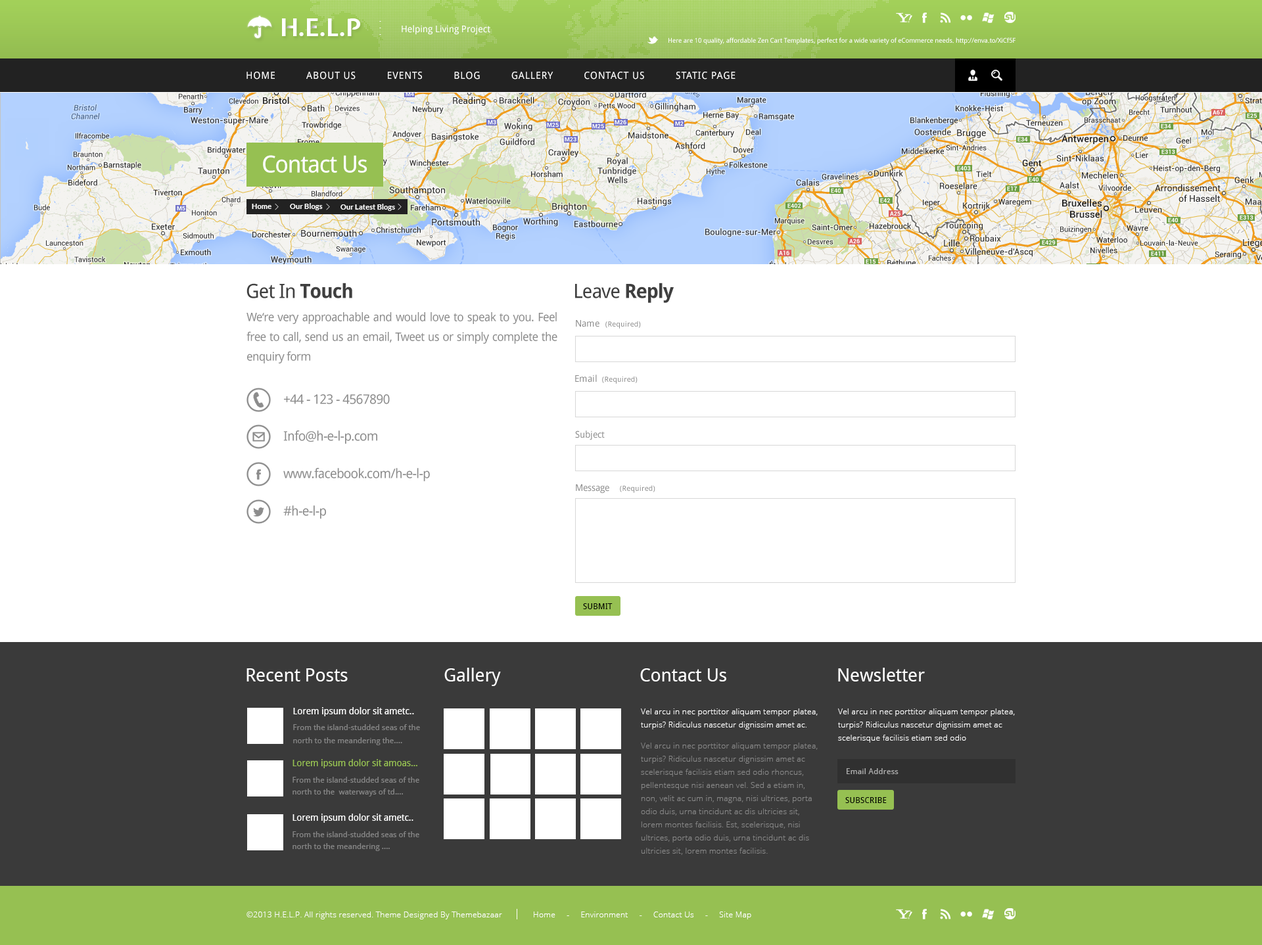
<style>
.page{position:relative;width:1262px;height:945px;background:#ffffff}
.page>*{position:absolute;margin:0}
.t1{font:24.3px "ExpletusSans-Bold";color:#ffffff}
.t2{font:7.9px/6.6px "ExpletusSans-Bold";color:#ffffff}
.t3{font:9.2px "DroidSans";color:#ffffff}
.t4{font:6.6px "DroidSans";letter-spacing:-0.01em;color:#ffffff}
.t5{font:9.9px "DroidSans";letter-spacing:0.05em;color:#ffffff;text-transform:uppercase}
.t6{font:23.7px "DroidSans";letter-spacing:-0.04em;color:#ffffff}
.t7{font:7.2px "Lato-Bold";letter-spacing:0.01em;color:#ffffff}
.t8{font:19.7px "DroidSans";letter-spacing:-0.04em;color:#3f3f3f}
.t9{font:19.7px "DroidSans-Bold";letter-spacing:-0.04em;color:#3f3f3f}
.t10{font:11.8px/19.7px "DroidSans";letter-spacing:-0.04em;color:#8c8c8c}
.t11{font:9.2px "DroidSans";color:#8c8c8c}
.t12{font:7.2px "DroidSans";letter-spacing:0.025em;color:#8c8c8c}
.t13{font:13.1px "DroidSans";letter-spacing:-0.04em;color:#8c8c8c}
.t14{font:7.9px "DroidSans";letter-spacing:0.025em;color:#000000;text-transform:uppercase}
.t15{font:18.4px "DroidSans";letter-spacing:-0.01em;color:#ffffff}
.t16{font:9.2px "DroidSans";letter-spacing:-0.01em;color:#ffffff}
.t17{font:7.9px/13.1px "OpenSans-Light";letter-spacing:0.025em;color:#ffffff}
.t18{font:7.9px/13.1px "DroidSans";color:#868686}
.t19{font:7.9px/13.1px "OpenSans-Light";letter-spacing:0.025em;color:#868686}
.t20{font:9.2px "DroidSans";letter-spacing:-0.01em;color:#96c052}
.t21{font:7.9px "DroidSans";letter-spacing:0.025em;color:#adadad}
.t22{font:7.9px/11.8px "DroidSans";color:#868686}
.t23{font:7.9px "OpenSans-Light";letter-spacing:0.025em;color:#ffffff}
</style>
<div class="page">
<p class="t1" style="left:282px;top:18px;width:79px;height:18px">H.E.L.P</p>
<p class="t2" style="left:379px;top:21px;width:2px;height:14px">.<br>.<br>.</p>
<p class="t3" style="left:402px;top:25px;width:88px;height:10px">Helping Living Project</p>
<p class="t4" style="left:668px;top:37px;width:347px;height:8px">Here are 10 quality, affordable Zen Cart Templates, perfect for a wide variety of eCommerce needs. http://enva.to/XiCf5F</p>
<p class="t5" style="left:246px;top:72px;width:489px;height:8px">Home          About Us          Events          Blog          Gallery          Contact Us          Static Page</p>
<p class="t6" style="left:263px;top:155px;width:104px;height:18px">Contact Us</p>
<p class="t7" style="left:252px;top:204px;width:19px;height:5px">Home</p>
<p class="t7" style="left:290px;top:203px;width:33px;height:7px">Our Blogs</p>
<p class="t7" style="left:340px;top:204px;width:55px;height:7px">Our Latest Blogs</p>
<p class="t8" style="left:246px;top:283px;width:106px;height:15px">Get In <span class="t9">Touch</span></p>
<p class="t8" style="left:575px;top:283px;width:99px;height:20px">Leave <span class="t9">Reply</span></p>
<p class="t10" style="left:246px;top:312px;width:311px;height:51px;text-align:justify">We‘re very approachable and would love to speak to you. Feel free to call, send us an email, Tweet us or simply complete the enquiry form</p>
<p class="t11" style="left:576px;top:320px;width:23px;height:7px">Name</p>
<p class="t12" style="left:605px;top:321px;width:36px;height:8px">(Required)</p>
<p class="t11" style="left:575px;top:375px;width:22px;height:7px">Email</p>
<p class="t12" style="left:602px;top:376px;width:35px;height:8px">(Required)</p>
<p class="t13" style="left:284px;top:394px;width:106px;height:10px">+44 - 123 - 4567890</p>
<p class="t13" style="left:283px;top:430px;width:94px;height:14px">Info@h-e-l-p.com</p>
<p class="t11" style="left:575px;top:430px;width:30px;height:10px">Subject</p>
<p class="t13" style="left:283px;top:468px;width:147px;height:14px">www.facebook.com/h-e-l-p</p>
<p class="t11" style="left:576px;top:484px;width:33px;height:10px">Message</p>
<p class="t12" style="left:620px;top:485px;width:35px;height:8px">(Required)</p>
<p class="t13" style="left:283px;top:505px;width:43px;height:14px">#h-e-l-p</p>
<p class="t14" style="left:583px;top:603px;width:29px;height:6px">Submit</p>
<p class="t15" style="left:246px;top:668px;width:102px;height:13px">Recent Posts</p>
<p class="t15" style="left:444px;top:668px;width:57px;height:18px">Gallery</p>
<p class="t15" style="left:640px;top:668px;width:86px;height:13px">Contact Us</p>
<p class="t15" style="left:838px;top:668px;width:87px;height:13px">Newsletter</p>
<p class="t16" style="left:293px;top:707px;width:121px;height:9px">Lorem ipsum dolor sit ametc..</p>
<p class="t17" style="left:641px;top:708px;width:177px;height:21px">Vel arcu in nec porttitor aliquam tempor platea, turpis? Ridiculus nascetur dignissim amet ac.</p>
<p class="t17" style="left:838px;top:708px;width:177px;height:35px">Vel arcu in nec porttitor aliquam tempor platea, turpis? Ridiculus nascetur dignissim amet ac scelerisque facilisis etiam sed odio</p>
<p class="t18" style="left:293px;top:724px;width:127px;height:21px">From the island-studded seas of the north to the meandering the....</p>
<p class="t19" style="left:641px;top:743px;width:177px;height:112px">Vel arcu in nec porttitor aliquam tempor platea, turpis? Ridiculus nascetur dignissim amet ac scelerisque facilisis etiam sed odio rhoncus, pellentesque nisi aenean vel. Sed a etiam in, non, velit ac cum in, magna, nisi ultrices, porta odio duis, urna tincidunt ac dis ultricies sit, lorem montes facilisis. Est, scelerisque, nisi ultrices, porta odio duis, urna tincidunt ac dis ultricies sit, lorem montes facilisis.</p>
<p class="t20" style="left:292px;top:759px;width:125px;height:9px">Lorem ipsum dolor sit amoas...</p>
<p class="t21" style="left:846px;top:768px;width:52px;height:6px">Email Address</p>
<p class="t22" style="left:292px;top:777px;width:127px;height:20px">From the island-studded seas of the north to the  waterways of td....</p>
<p class="t14" style="left:845px;top:797px;width:42px;height:6px">Subscribe</p>
<p class="t16" style="left:292px;top:814px;width:121px;height:9px">Lorem ipsum dolor sit ametc..</p>
<p class="t22" style="left:292px;top:831px;width:127px;height:20px">From the island-studded seas of the north to the meandering ....</p>
<p class="t23" style="left:246px;top:912px;width:256px;height:7px">©2013 H.E.L.P. All rights reserved. Theme Designed By Themebazaar</p>
<p class="t23" style="left:534px;top:912px;width:217px;height:7px">Home     -     Environment     -     Contact Us     -     Site Map</p>
</div>
